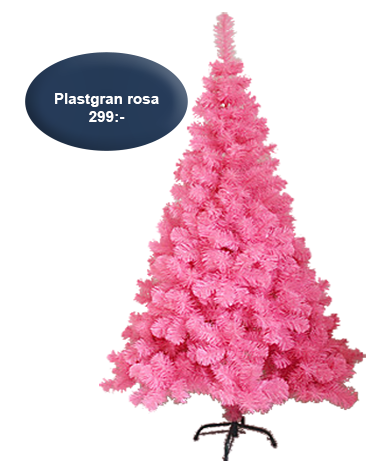
<style>
.page{position:relative;width:382px;height:461px;background:#ffffff}
.page>*{position:absolute;margin:0}
.t1{font:15.1px "Arial-BoldMT";color:#ffffff}
</style>
<div class="page">
<p class="t1" style="left:55px;top:93px;width:104px;height:29px;text-align:center">Plastgran rosa<br>299:-</p>
</div>
